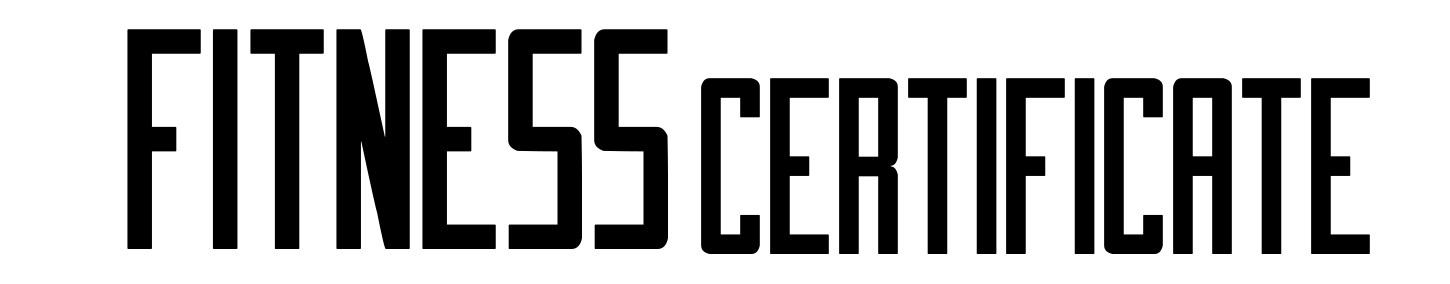
<style>
.page{position:relative;width:1450px;height:284px;background:#ffffff}
.page>*{position:absolute;margin:0}
.t1{font:250px "ImnovaSt";color:#000000}
.t2{font:200px "ImnovaSt";color:#000000}
</style>
<div class="page">
<p class="t1" style="left:127px;top:29px;width:541px;height:220px">Fitness</p>
<p class="t2" style="left:701px;top:78px;width:669px;height:176px">CertifIcate</p>
</div>
